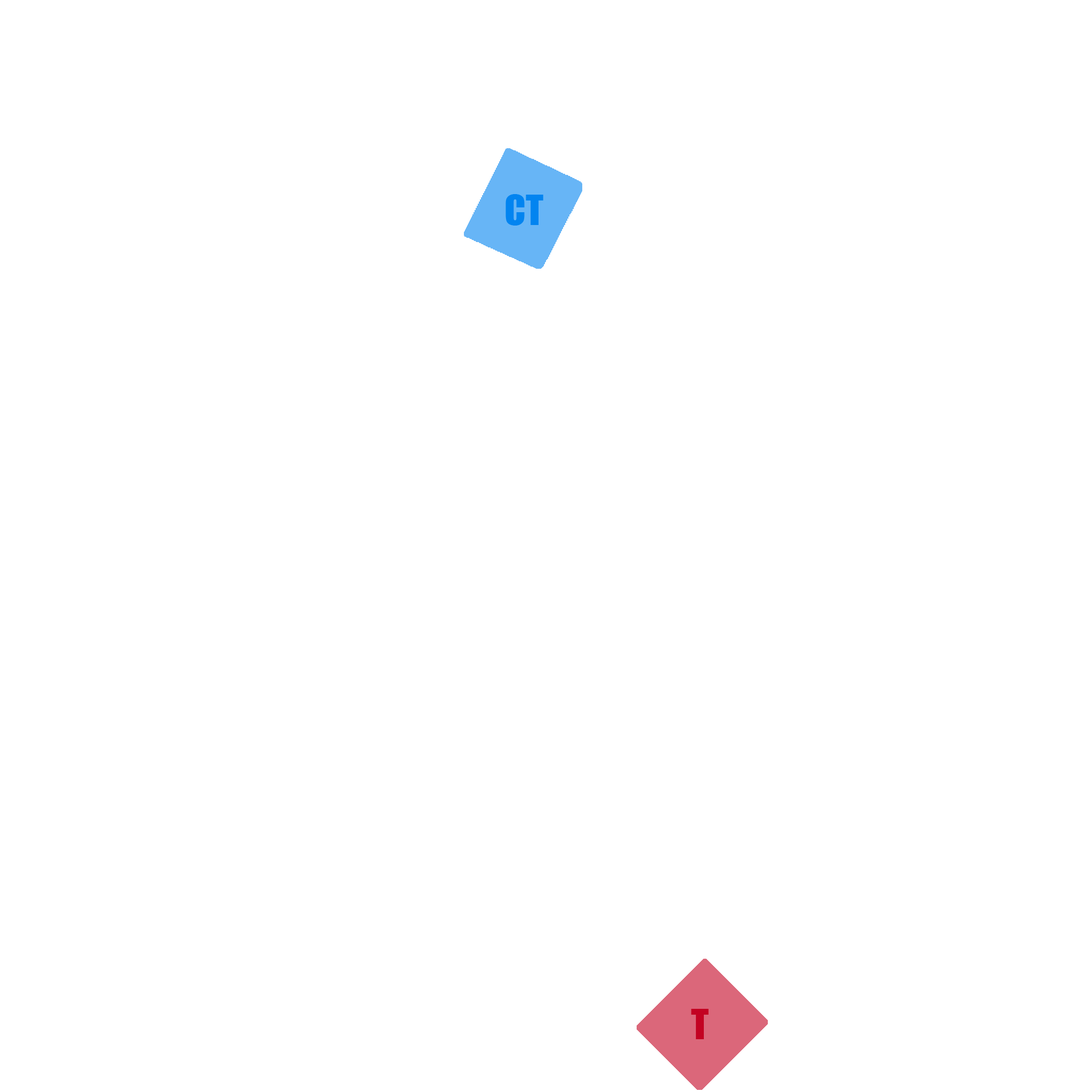
<style>
.page{position:relative;width:1092px;height:1092px;background:#ffffff}
.page>*{position:absolute;margin:0}
.t1{font:38.4px "Impact";color:#0284f0}
.t2{font:38.4px "Impact";color:#c30222}
</style>
<div class="page">
<p class="t1" style="left:505px;top:194px;width:38px;height:32px">CT</p>
<p class="t2" style="left:691px;top:1009px;width:18px;height:30px">T</p>
</div>
